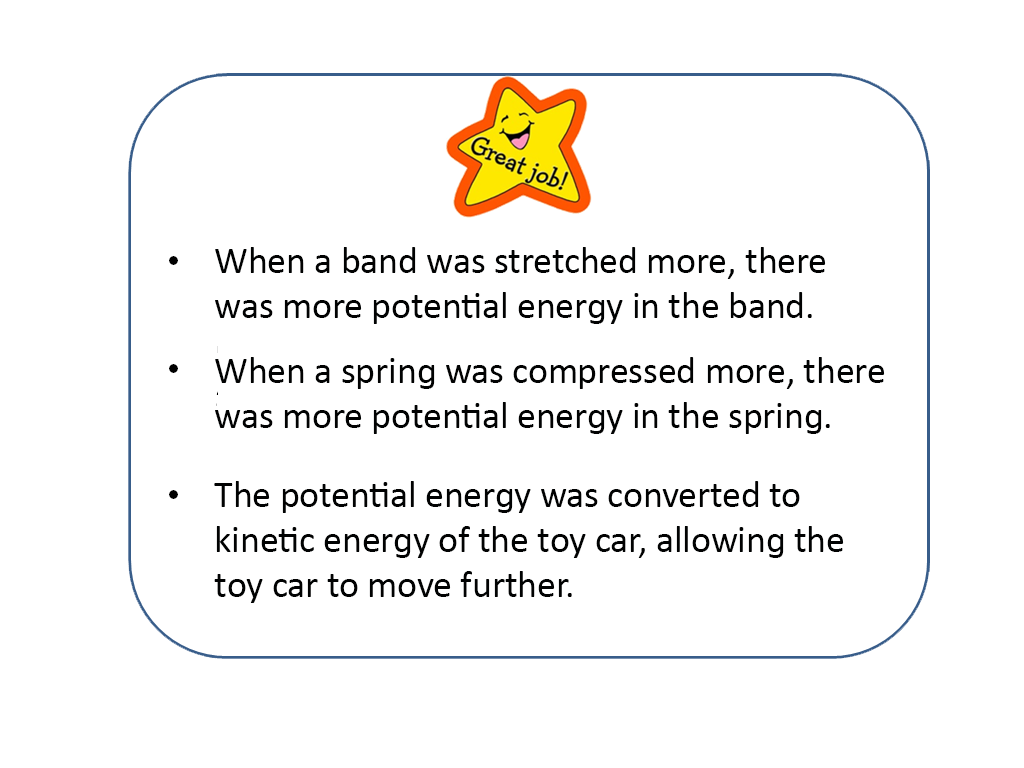
<style>
.page{position:relative;width:1024px;height:768px;background:#ffffff}
.page>*{position:absolute;margin:0}
.t1{font:37.5px "Calibri";color:#010202}
</style>
<div class="page">
<p class="t1" style="left:215px;top:247px;width:611px;height:77px">When a band was stretched more, there was more potential energy in the band.</p>
<p class="t1" style="left:215px;top:357px;width:670px;height:77px">When a spring was compressed more, there was more potential energy in the spring.</p>
<p class="t1" style="left:214px;top:481px;width:630px;height:122px">The potential energy was converted to <br>kinetic energy of the toy car, allowing the toy car to move further.</p>
</div>
